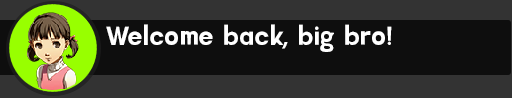
<style>
.page{position:relative;width:512px;height:98px;background:#0e0e0e}
.page>*{position:absolute;margin:0}
.t1{font:26.2px "Minerva-Regular";color:#ffffff}
</style>
<div class="page">
<p class="t1" style="left:106px;top:24px;width:286px;height:28px">Welcome back, big bro!</p>
</div>
